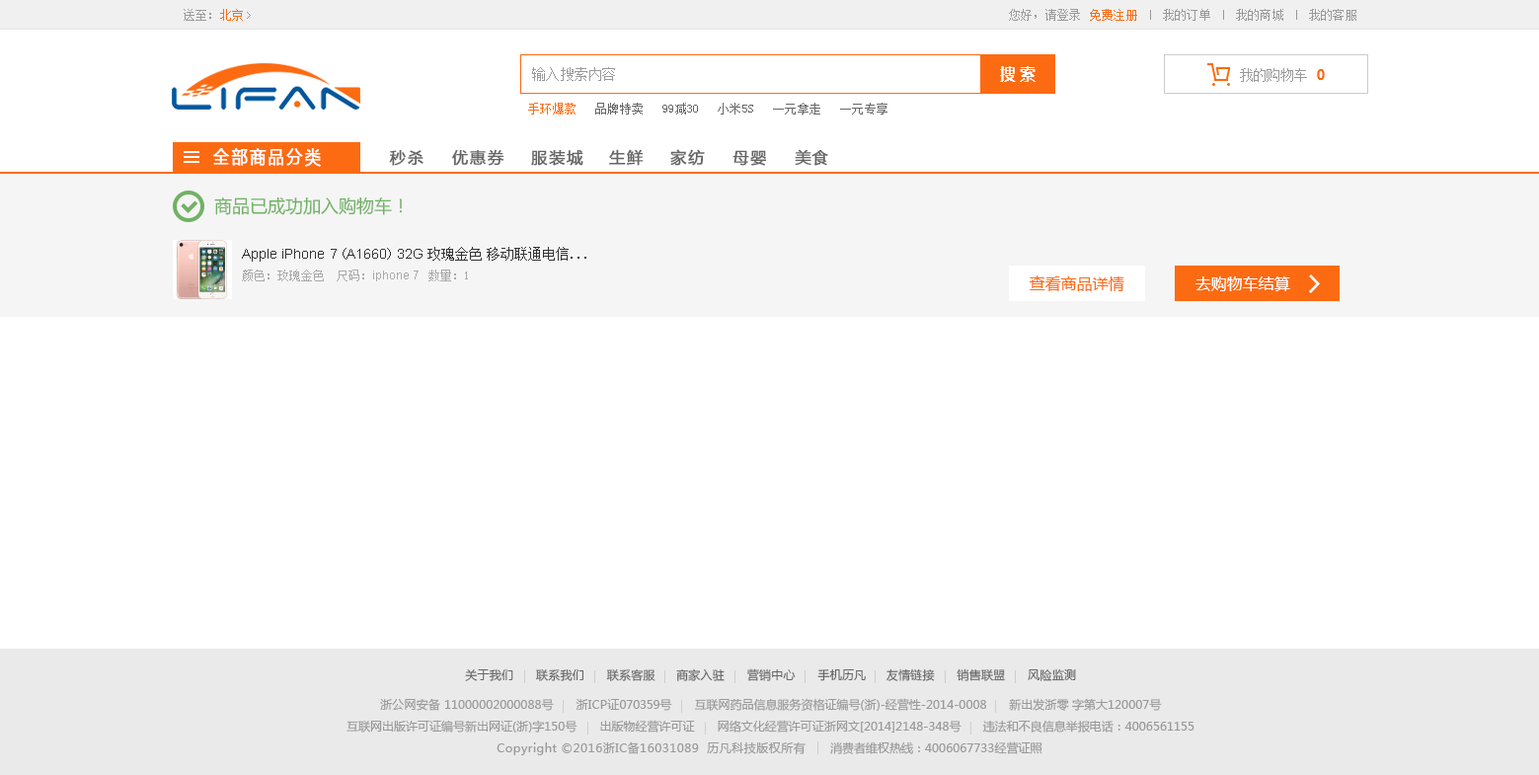
<style>
.page{position:relative;width:1539px;height:775px;background:#ffffff}
.page>*{position:absolute;margin:0}
.t1{font:11.8px "SimSun";letter-spacing:0.02em;color:#999999}
.t2{font:11.8px "SimSun";letter-spacing:0.02em;color:#fc6b12}
.t3{font:13.8px "SimSun";letter-spacing:0.02em;color:#999999}
.t4{font:15.8px "MicrosoftYaHei-Bold";letter-spacing:0.02em;color:#ffffff}
.t5{font:13.8px "SimSun";letter-spacing:-0.06em;color:#999999}
.t6{font:13.8px "MicrosoftYaHei-Bold";letter-spacing:-0.06em;color:#fc6b12}
.t7{font:11.8px "SimSun";letter-spacing:0.02em;color:#666666}
.t8{font:17.4px "MicrosoftYaHei";letter-spacing:0.1em;color:#ffffff;font-weight:bold;scale:0.91 1}
.t9{font:15.6px "MicrosoftYaHei";letter-spacing:0.06em;color:#666666;font-weight:bold}
.t10{font:17.8px "MicrosoftYaHei";color:#71b265}
.t11{font:13.8px "ArialMT";color:#333333}
.t12{font:13.8px "SimSun";color:#333333}
.t13{font:11.8px "SimSun";color:#aaaaaa}
.t14{font:11.8px "ArialMT";color:#aaaaaa}
.t15{font:15.8px "MicrosoftYaHei";color:#fc6b12}
.t16{font:15.8px "MicrosoftYaHei";color:#ffffff}
.t17{font:11.8px "MicrosoftYaHei";letter-spacing:0.02em;color:#666666}
.t18{font:11.8px "MicrosoftYaHei";color:#999999}
.t19{font:11.8px "MicrosoftYaHei";letter-spacing:0.02em;color:#999999}
.t20{font:11.8px "MicrosoftYaHei";letter-spacing:-0.02em;color:#999999}
.t21{font:11.8px "MicrosoftYaHei";letter-spacing:0.04em;color:#999999}
</style>
<div class="page">
<p class="t1" style="left:184px;top:9px;width:59px;height:12px">送至：<span class="t2">北京</span></p>
<p class="t1" style="left:1009px;top:9px;width:71px;height:12px">您好，请登录</p>
<p class="t2" style="left:1090px;top:9px;width:47px;height:12px">免费注册</p>
<p class="t1" style="left:1163px;top:9px;width:47px;height:12px">我的订单</p>
<p class="t1" style="left:1236px;top:9px;width:47px;height:12px">我的商城</p>
<p class="t1" style="left:1309px;top:9px;width:47px;height:12px">我的客服</p>
<p class="t3" style="left:532px;top:67px;width:83px;height:14px">输入搜索内容</p>
<p class="t4" style="left:1000px;top:66px;width:35px;height:16px">搜 索</p>
<p class="t5" style="left:1240px;top:68px;width:67px;height:14px">我的购物车</p>
<p class="t6" style="left:1317px;top:69px;width:8px;height:11px">0</p>
<p class="t2" style="left:528px;top:103px;width:47px;height:12px">手环爆款</p>
<p class="t7" style="left:595px;top:103px;width:48px;height:12px">品牌特卖</p>
<p class="t7" style="left:662px;top:103px;width:36px;height:12px">99减30</p>
<p class="t7" style="left:718px;top:103px;width:35px;height:12px">小米5S</p>
<p class="t7" style="left:773px;top:103px;width:47px;height:12px">一元拿走</p>
<p class="t7" style="left:840px;top:103px;width:47px;height:12px">一元专享</p>
<p class="t8" style="left:212px;top:148px;width:109px;height:19px">全部商品分类</p>
<p class="t9" style="left:389px;top:149px;width:34px;height:17px">秒杀</p>
<p class="t9" style="left:452px;top:149px;width:52px;height:17px">优惠券</p>
<p class="t9" style="left:531px;top:149px;width:52px;height:17px">服装城</p>
<p class="t9" style="left:609px;top:149px;width:35px;height:17px">生鲜</p>
<p class="t9" style="left:670px;top:149px;width:35px;height:17px">家纺</p>
<p class="t9" style="left:795px;top:149px;width:33px;height:17px">美食</p>
<p class="t9" style="left:732px;top:150px;width:35px;height:16px">母婴</p>
<p class="t10" style="left:214px;top:196px;width:189px;height:19px">商品已成功加入购物车！</p>
<p class="t11" style="left:242px;top:247px;width:344px;height:15px">Apple iPhone 7<span class="t12">（</span>A1660<span class="t12">）</span>32G <span class="t12">玫瑰金色 移动联通电信...</span></p>
<p class="t13" style="left:242px;top:269px;width:226px;height:12px">颜色：玫瑰金色  尺码：<span class="t14">iphone 7 </span> 数量：1</p>
<p class="t15" style="left:1030px;top:275px;width:94px;height:16px">查看商品详情</p>
<p class="t16" style="left:1195px;top:276px;width:95px;height:15px">去购物车结算</p>
<p class="t17" style="left:465px;top:668px;width:611px;height:13px">关于我们      联系我们      联系客服     商家入驻      营销中心      手机历凡     友情链接      销售联盟      风险监测</p>
<p class="t18" style="left:380px;top:698px;width:782px;height:13px"><span class="t19">浙公网安备 </span>11000002000088<span class="t19">号      浙ICP证</span><span class="t20">070359号     </span>互联网药品信息服务资格证编号(<span class="t19">浙</span>)-经营性-2014-0008      新出发<span class="t19">浙</span>零 字第大120007号</p>
<p class="t18" style="left:346px;top:720px;width:848px;height:12px">互联网出版许可证编号新出网证(<span class="t19">浙</span>)字150号       出版物经营许可证       网络文化经营许可证<span class="t19">浙</span>网文[2014]2148-348号       违法和不良信息举报电话：4006561155</p>
<p class="t21" style="left:497px;top:741px;width:545px;height:14px"><span class="t18"><br><br></span>Copyright ©2016浙IC备16031089  历凡科技版权所有<span class="t18">       消费者维权热线：4006067733经营证照</span></p>
</div>
